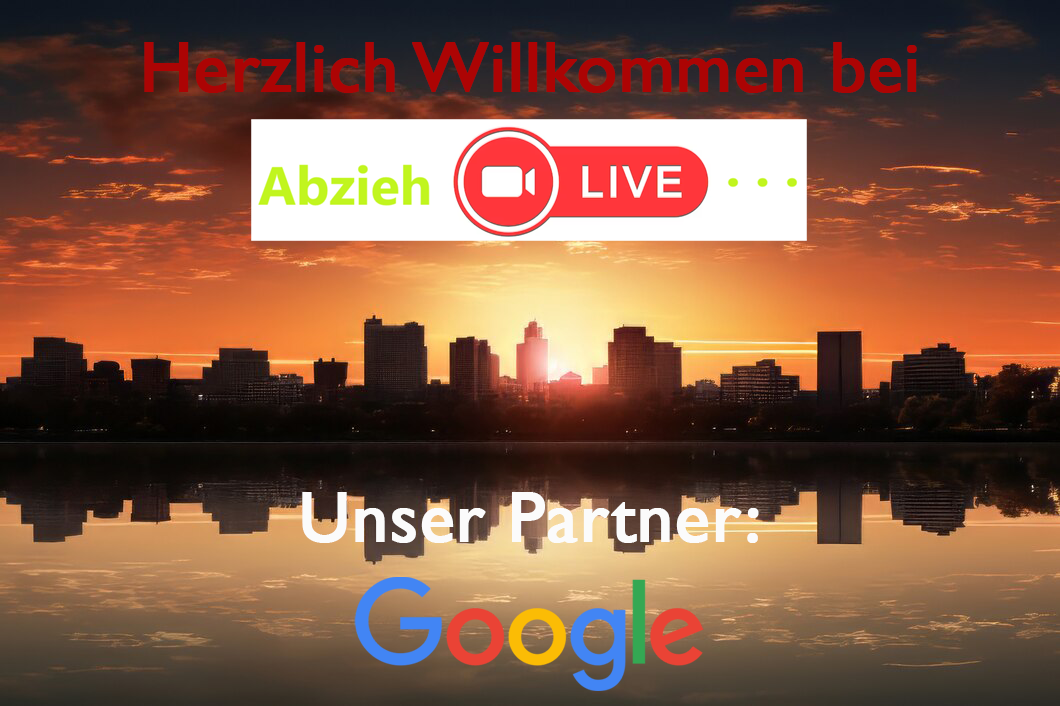
<style>
.page{position:relative;width:1060px;height:706px}
.page>*{position:absolute;margin:0}
.t1{font:72px "GillSansMT";color:#ac0404;font-weight:bold}
.t2{font:72px "GillSansMT";color:#fbfbfb;font-weight:bold}
</style>
<div class="page">
<p class="t1" style="left:144px;top:42px;width:773px;height:51px">Herzlich Willkommen bei</p>
<p class="t2" style="left:302px;top:492px;width:457px;height:51px">Unser Partner:</p>
</div>
